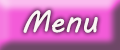
<style>
.page{position:relative;width:120px;height:50px}
.page>*{position:absolute;margin:0}
.t1{font:30px "MVBoli";color:#fbf4f4}
</style>
<div class="page">
<p class="t1" style="left:23px;top:10px;width:75px;height:23px">Menu</p>
</div>
